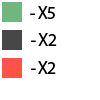
<style>
.page{position:relative;width:100px;height:100px;background:#ffffff}
.page>*{position:absolute;margin:0}
.t1{font:18px "MyriadPro-Regular";letter-spacing:-0.05em;color:#000000}
</style>
<div class="page">
<p class="t1" style="left:30px;top:6px;width:25px;height:13px">- X5</p>
<p class="t1" style="left:31px;top:33px;width:26px;height:13px">- X2</p>
<p class="t1" style="left:31px;top:61px;width:25px;height:13px">- X2</p>
</div>
